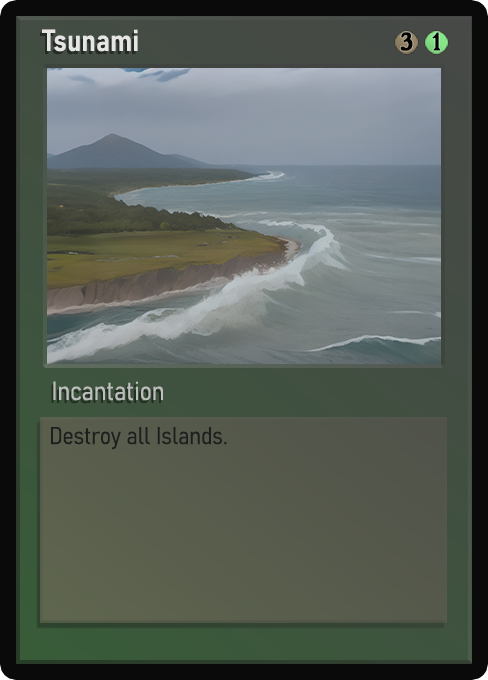
<style>
.page{position:relative;width:488px;height:680px}
.page>*{position:absolute;margin:0}
.t1{font:30px "Bahnschrift-SemiBoldSemiCondensed";color:#f2f2f2;font-weight:bold}
.t2{font:25px "WTRRoycroft";color:#000000;font-weight:bold;scale:1.09 1}
.t3{font:26px "Bahnschrift-LightSemiCondensed";color:#c8c8c8;font-weight:bold}
.t4{font:24px "Bahnschrift-LightSemiCondensed";color:#1e1e1e;font-weight:bold}
</style>
<div class="page">
<p class="t1" style="left:42px;top:29px;width:96px;height:23px;opacity:0.9">Tsunami</p>
<p class="t2" style="left:400px;top:32px;width:13px;height:19px">3</p>
<p class="t2" style="left:432px;top:32px;width:9px;height:19px">1</p>
<p class="t3" style="left:53px;top:381px;width:110px;height:20px;opacity:0.9">Incantation</p>
<p class="t4" style="left:51px;top:427px;width:176px;height:23px">Destroy all Islands.</p>
</div>
